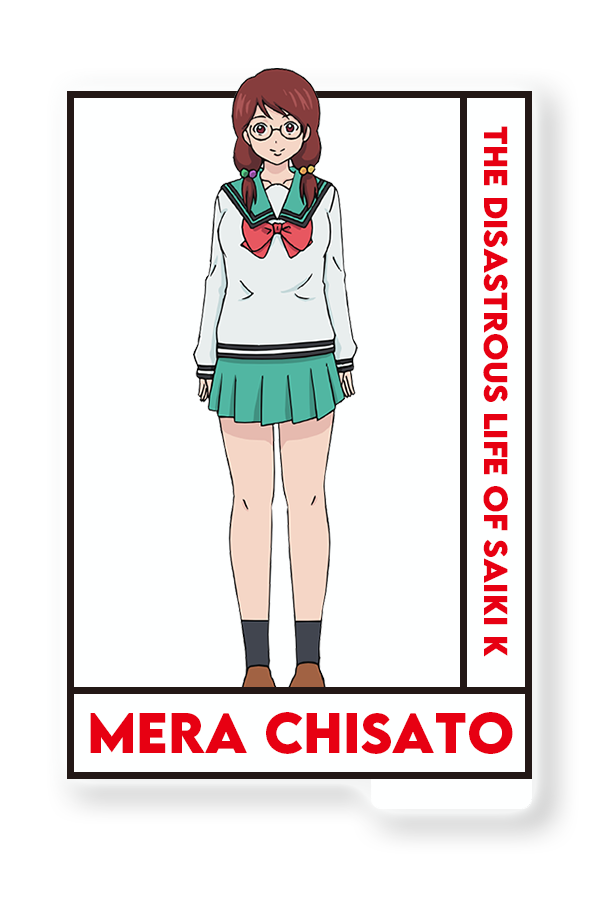
<style>
.page{position:relative;width:600px;height:900px;background:#feffff}
.page>*{position:absolute;margin:0}
.t1{font:29.6px "LEMONMILK-Bold";color:#e70012}
.t2{font:50.5px "LEMONMILK-Bold";color:#e70012}
</style>
<div class="page">
<p class="t1" style="left:483px;top:126px;width:25px;height:531px;rotate:90deg">THE disastrous Life of saiki K</p>
<p class="t2" style="left:90px;top:712px;width:423px;height:42px">Mera Chisato</p>
</div>
